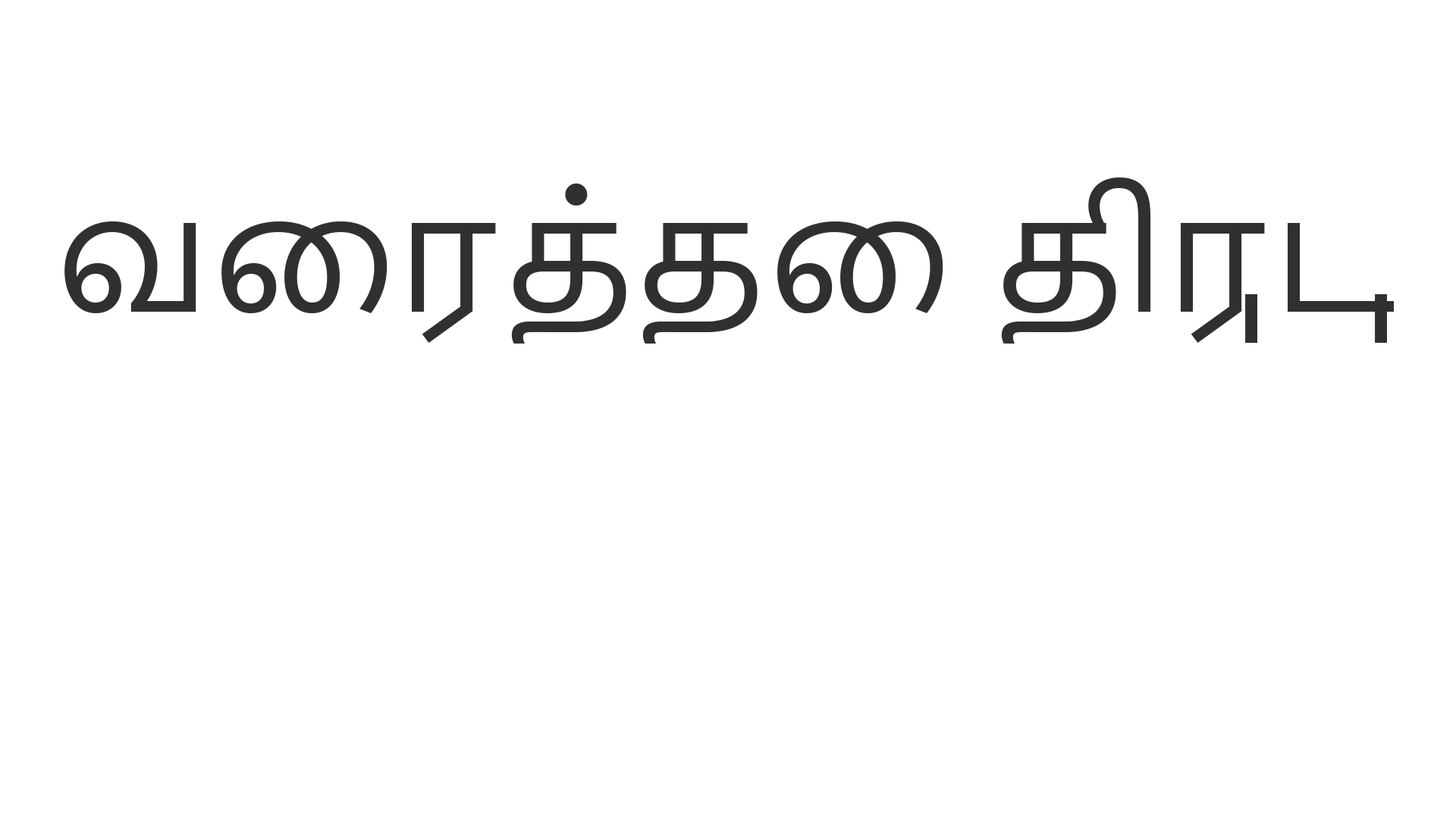
<style>
.page{position:relative;width:1456px;height:819px;background:#ffffff}
.page>*{position:absolute;margin:0}
.t1{font:151.7px "NirmalaUI";color:#303030}
</style>
<div class="page">
<p class="t1" style="left:64px;top:177px;width:1330px;height:167px">வைரத்தை திருடு</p>
</div>
